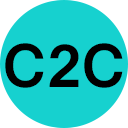
<style>
.page{position:relative;width:128px;height:128px;background:#16d1cf}
.page>*{position:absolute;margin:0}
.t1{font:58.3px "Mangal-Bold";color:#000000}
</style>
<div class="page">
<p class="t1" style="left:5px;top:43px;width:118px;height:45px">C2C</p>
</div>
